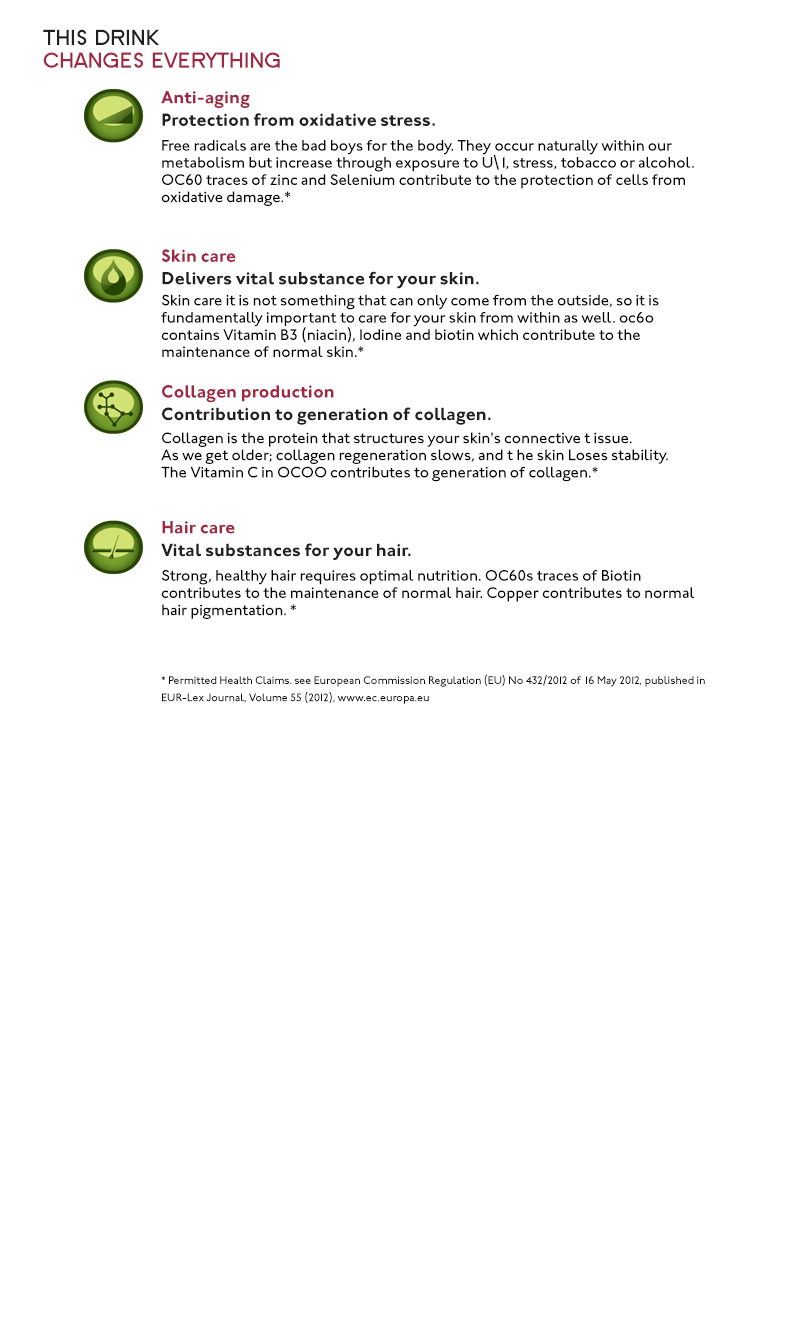
<style>
.page{position:relative;width:800px;height:1343px;background:#ffffff}
.page>*{position:absolute;margin:0}
.t1{font:22.6px/22.6px "SFOldRepublicSC-Bold";letter-spacing:-0.005em;color:#a02842}
.t2{font:22.6px/22.6px "SFOldRepublicSC-Bold";letter-spacing:-0.005em;color:#231f20}
.t3{font:18.1px/22.6px "JohnstonITCStd-Bold";color:#231f20}
.t4{font:18.1px/22.6px "JohnstonITCStd-Bold";color:#a02842}
.t5{font:15.8px/17.2px "JohnstonITCStd-Medium";letter-spacing:-0.005em;color:#000000}
.t6{font:11.3px/17.2px "JohnstonITCStd-Medium";letter-spacing:-0.005em;color:#000000}
</style>
<div class="page">
<p class="t1" style="left:43px;top:29px;width:237px;height:39px"><span class="t2">THIS DRINK<br></span>CHANGES EVERYTHING</p>
<p class="t3" style="left:161px;top:90px;width:330px;height:470px"><span class="t4">Anti-aging<br></span>Protection from oxidative stress. <br><br><br><br><br><br><span class="t4">Skin care<br></span>Delivers vital substance for your skin.<br><br><br><br><br><span class="t4">Collagen production<br></span>Contribution to generation of collagen.<br><br><br><br><br><span class="t4">Hair care<br></span>Vital substances for your hair.</p>
<p class="t5" style="left:161px;top:140px;width:544px;height:564px">Free radicals are the bad boys for the body. They occur naturally within our<br>metabolism but increase through exposure to U\1, stress, tobacco or alcohol.<br>OC60 traces of zinc and Selenium contribute to the protection of cells from<br>oxidative damage.*<br><br><br><br><br><br>Skin care it is not something that can only come from the outside, so it is<br>fundamentally important to care for your skin from within as well. oc6o<br>contains Vitamin B3 (niacin), Iodine and biotin which contribute to the<br>maintenance of normal skin.*<br><br><br><br><br>Collagen is the protein that structures your skin's connective t issue.<br>As we get older; collagen regeneration slows, and t he skin Loses stability.<br>The Vitamin C in OCOO contributes to generation of collagen.*<br><br><br><br><br><br>Strong, healthy hair requires optimal nutrition. OC60s traces of Biotin<br>contributes to the maintenance of normal hair. Copper contributes to normal<br>hair pigmentation. *<br><br><br><br><span class="t6">* Permitted Health Claims. see European Commission Regulation (EU) No 432/2012 of 16 May 2012, published in EUR-Lex Journal, Volume 55 (2012), www.ec.europa.eu</span></p>
</div>
